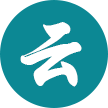
<style>
.page{position:relative;width:108px;height:108px;background:#0c8894}
.page>*{position:absolute;margin:0}
.t1{font:90px "STXingkai";color:#ffffff}
</style>
<div class="page">
<p class="t1" style="left:20px;top:22px;width:62px;height:65px">云</p>
</div>
